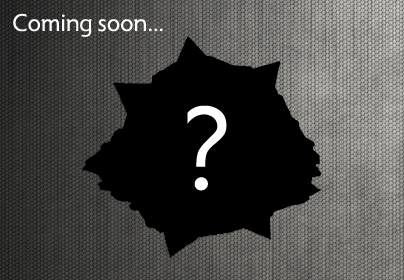
<style>
.page{position:relative;width:404px;height:280px;background:#000000}
.page>*{position:absolute;margin:0}
.t1{font:25px "Radiance";color:#fefefe}
.t2{font:125px "Radiance";color:#fefefe}
</style>
<div class="page">
<p class="t1" style="left:13px;top:13px;width:150px;height:24px">Coming soon...</p>
<p class="t2" style="left:187px;top:105px;width:40px;height:86px">?</p>
</div>
